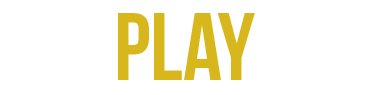
<style>
.page{position:relative;width:368px;height:95px;background:#ffffff}
.page>*{position:absolute;margin:0}
.t1{font:96px "BebasNeueBold";color:#d8b71c}
</style>
<div class="page">
<p class="t1" style="left:118px;top:13px;width:137px;height:67px">Play</p>
</div>
